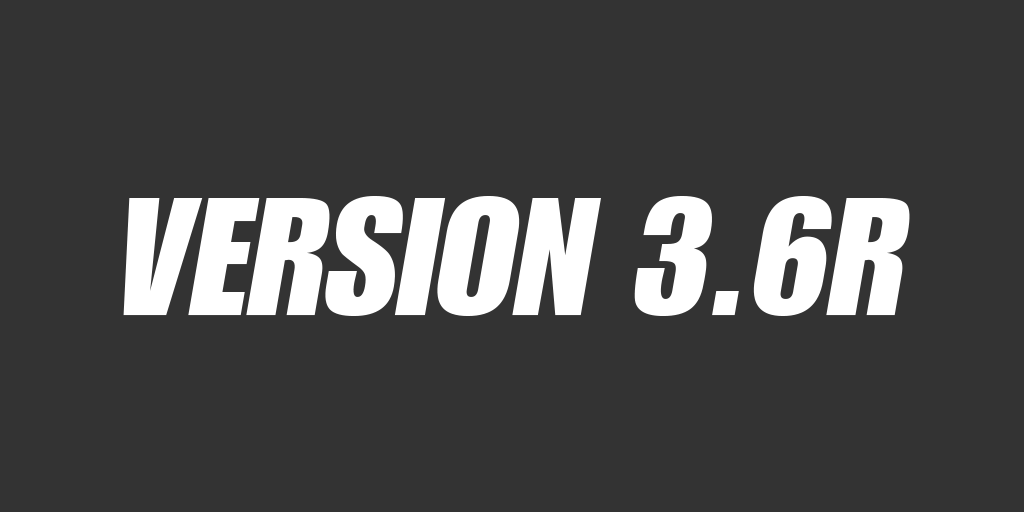
<style>
.page{position:relative;width:1024px;height:512px;background:#333333}
.page>*{position:absolute;margin:0}
.t1{font:165.3px "Genuine";letter-spacing:0.005em;color:#ffffff;text-transform:uppercase}
</style>
<div class="page">
<p class="t1" style="left:123px;top:196px;width:787px;height:120px">Version 3.6R</p>
</div>
